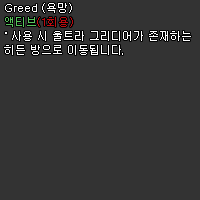
<style>
.page{position:relative;width:200px;height:200px;background:#333333}
.page>*{position:absolute;margin:0}
.t1{font:11px/14px "Dotum";color:#ffffff}
.t2{font:11px/14px "Dotum";color:#56c45b}
.t3{font:11px/14px "Dotum";color:#be0b0f}
</style>
<div class="page">
<p class="t1" style="left:4px;top:3px;width:187px;height:52px">Greed (욕망)<br><span class="t2">액티브</span><span class="t3">(1회용)<br></span>˚ 사용 시 울트라 그리디어가 존재하는<br>히든 방으로 이동됩니다.</p>
</div>
